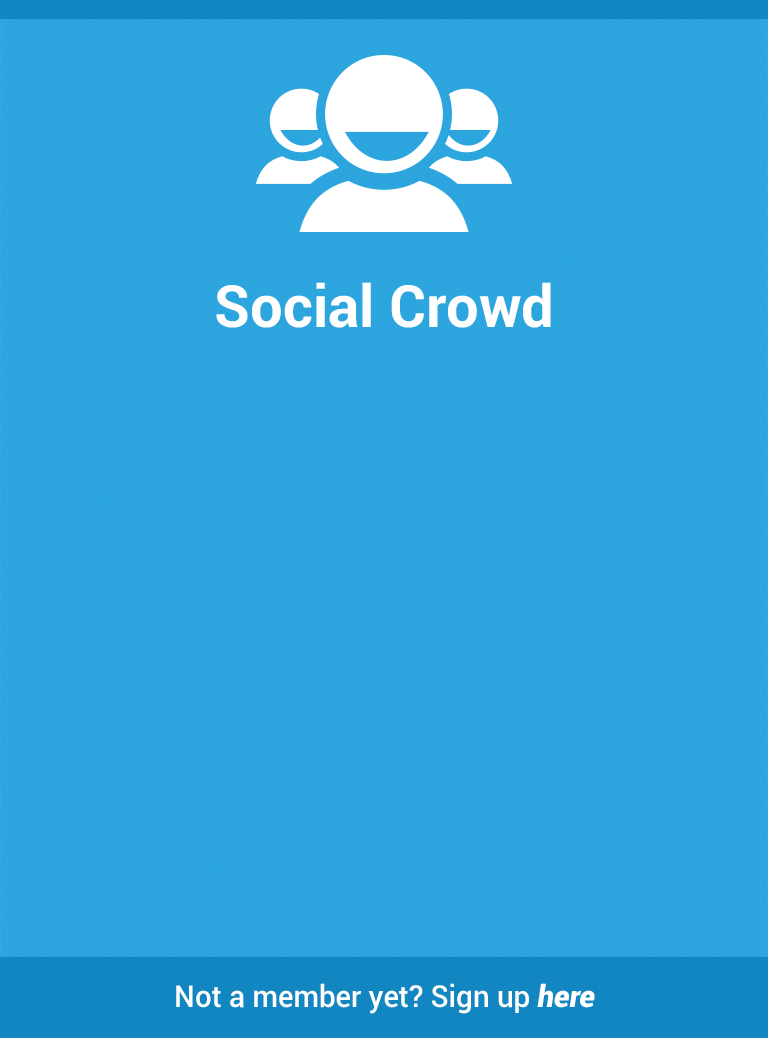
<style>
.page{position:relative;width:768px;height:1038px;background:#2da6df}
.page>*{position:absolute;margin:0}
.t1{font:58.3px "Roboto-Bold";color:#ffffff}
.t2{font:30px "Roboto-Medium";color:#ffffff}
.t3{font:30px "Roboto-BlackItalic";color:#ffffff}
</style>
<div class="page">
<p class="t1" style="left:216px;top:282px;width:335px;height:46px">Social Crowd</p>
<p class="t2" style="left:176px;top:983px;width:419px;height:31px">Not a member yet? Sign up <span class="t3">here</span></p>
</div>
